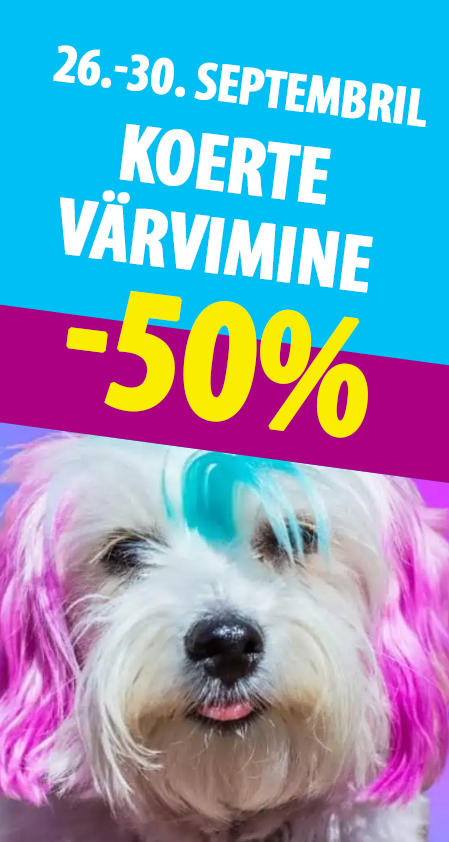
<style>
.page{position:relative;width:449px;height:842px;background:#00bff3}
.page>*{position:absolute;margin:0}
.t1{font:54.6px "MyriadPro-BoldCond";letter-spacing:-0.025em;color:#ffffff;text-transform:uppercase;font-weight:bold}
.t2{font:81.6px/82px "MyriadPro-BoldCond";letter-spacing:-0.025em;color:#ffffff;text-transform:uppercase;font-weight:bold}
.t3{font:174.6px "MyriadPro-BoldCond";letter-spacing:-0.025em;color:#faed02;text-transform:uppercase;font-weight:bold}
</style>
<div class="page">
<p class="t1" style="left:53px;top:45px;width:373px;height:82px;rotate:7deg">26.-30. septembril</p>
<p class="t2" style="left:60px;top:124px;width:313px;height:169px;text-align:center;rotate:7deg">KOERTE<br>VÄRVIMINE</p>
<p class="t3" style="left:66px;top:290px;width:302px;height:148px;rotate:7deg">-50%</p>
</div>
